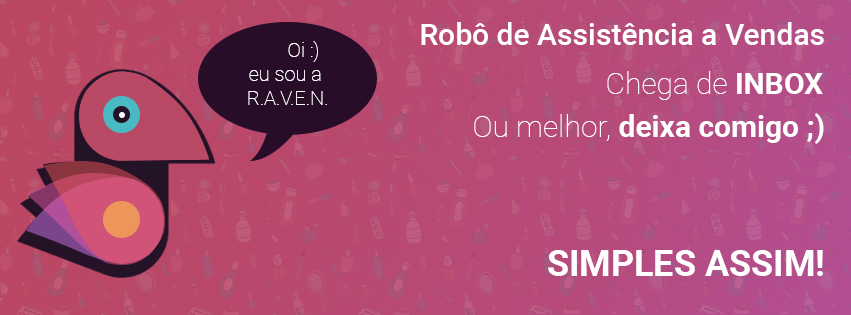
<style>
.page{position:relative;width:851px;height:315px}
.page>*{position:absolute;margin:0}
.t1{font:30px "Roboto-Medium";color:#ffffff}
.t2{font:20px "Roboto-Thin";color:#ffffff}
.t3{font:30px "Roboto-Thin";color:#ffffff}
.t4{font:30px "Roboto-Bold";color:#ffffff}
.t5{font:36px "Roboto-Bold";color:#ffffff}
</style>
<div class="page">
<p class="t1" style="left:421px;top:22px;width:403px;height:23px">Robô de Assistência a Vendas</p>
<p class="t2" style="left:248px;top:41px;width:79px;height:64px">Oi :)<br>eu sou a <br>R.A.V.E.N.</p>
<p class="t3" style="left:607px;top:71px;width:216px;height:29px">Chega de <span class="t4">INBOX</span></p>
<p class="t4" style="left:474px;top:113px;width:350px;height:31px"><span class="t3">Ou melhor,</span> deixa comigo ;)</p>
<p class="t5" style="left:548px;top:250px;width:275px;height:26px">SIMPLES ASSIM!</p>
</div>
